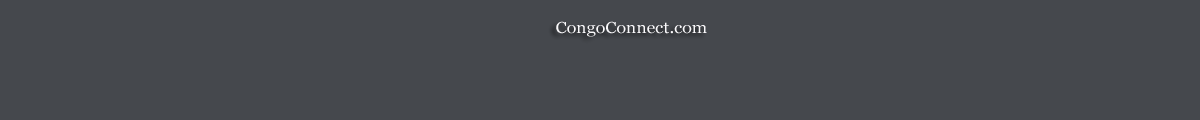
<style>
.page{position:relative;width:1200px;height:120px;background:#45484d}
.page>*{position:absolute;margin:0}
.t1{font:16px "Georgia";color:#faf9fb;scale:1.1 1}
</style>
<div class="page">
<p class="t1" style="left:556px;top:21px;width:151px;height:16px">CongoConnect.com</p>
</div>
